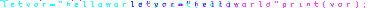
<style>
.page{position:relative;width:384px;height:8px;background:#ffffff}
.page>*{position:absolute;margin:0}
.t1{font:8px "Monaco";letter-spacing:0.4em;color:#24ffff}
</style>
<div class="page">
<p class="t1" style="left:3px;top:1px;width:234px;height:7px">letvar=”helloworld”print(var);<br>;</p>
</div>
